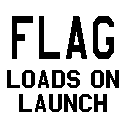
<style>
.page{position:relative;width:128px;height:128px;background:#ffffff}
.page>*{position:absolute;margin:0}
.t1{font:30px/24px "AmarilloUSAF";color:#000000}
</style>
<div class="page">
<p class="t1" style="left:7px;top:70px;width:112px;height:42px;text-align:center">Loads on<br>Launch</p>
</div>
